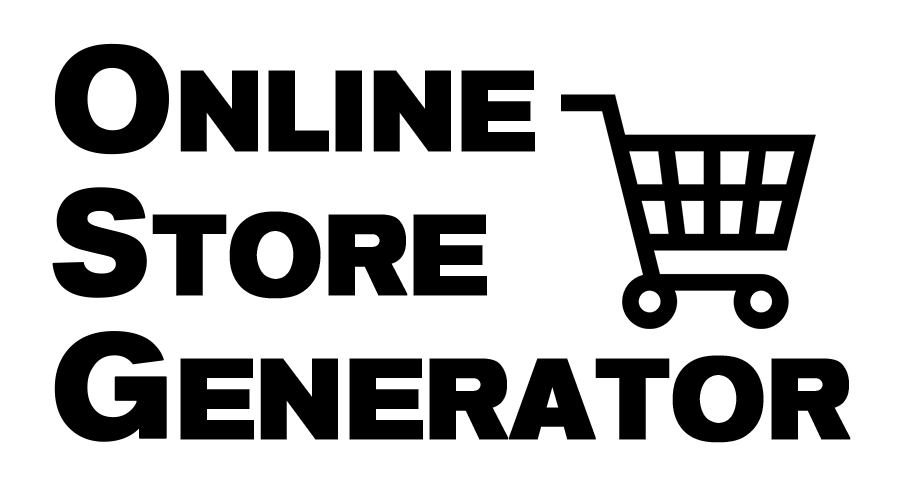
<style>
.page{position:relative;width:900px;height:500px;background:#ffffff}
.page>*{position:absolute;margin:0}
.t1{font:112.4px "THE_DONALD";color:#000000;font-weight:bold;scale:0.83 1}
.t2{font:144px "THE_DONALD";color:#000000;font-weight:bold;scale:0.83 1}
</style>
<div class="page">
<p class="t1" style="left:52px;top:43px;width:799px;height:400px"><span class="t2">O</span>NLINE<br><span class="t2">S</span>TORE<br><span class="t2">G</span>ENERATOR</p>
</div>
